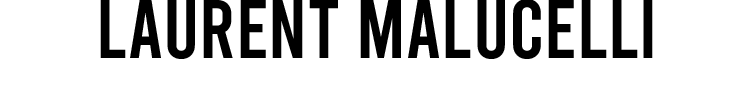
<style>
.page{position:relative;width:754px;height:87px;background:#ffffff}
.page>*{position:absolute;margin:0}
.t1{font:83.3px "Bebas-Regular";color:#000000}
</style>
<div class="page">
<p class="t1" style="left:100px;top:0px;width:553px;height:59px">Laurent malucelli</p>
</div>
